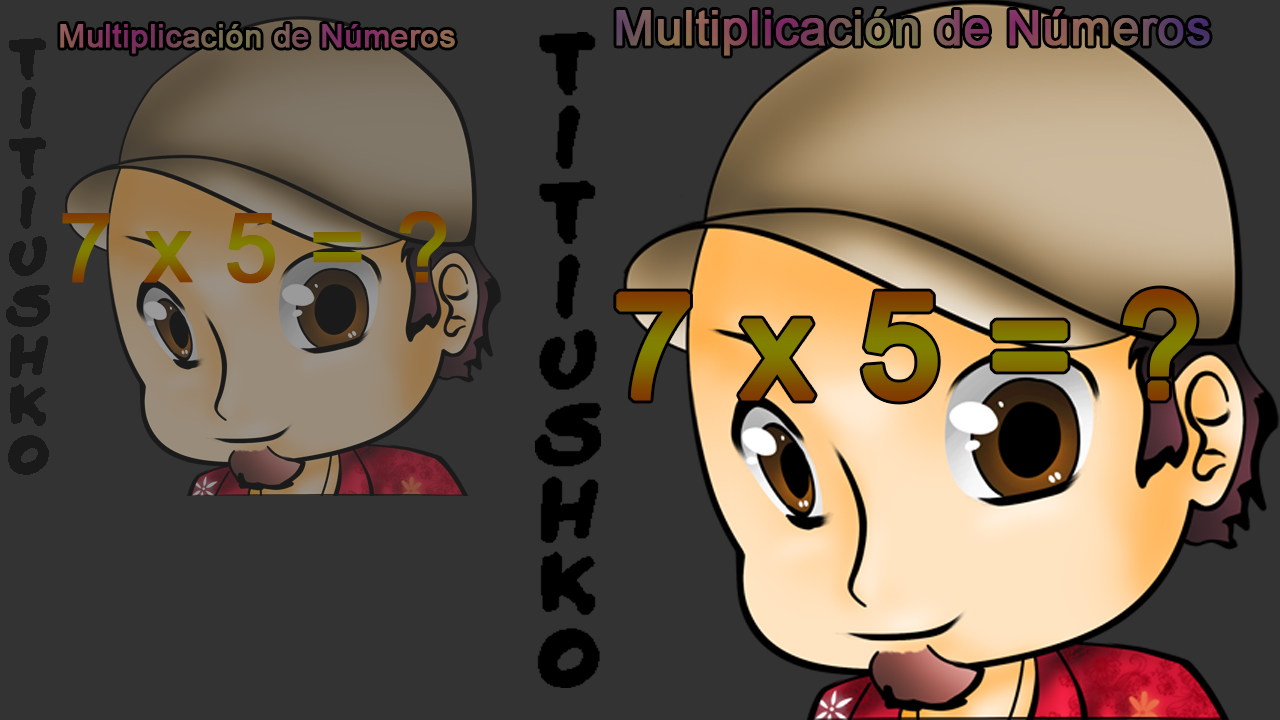
<style>
.page{position:relative;width:1280px;height:720px;background:#333333}
.page>*{position:absolute;margin:0}
.t1{font:48.3px "ArialMT";font-weight:bold}
.t2{font:32.1px "ArialMT";font-weight:bold}
.t3{font:95.5px "ArialMT";font-weight:bold}
.t4{font:143.5px "ArialMT";font-weight:bold}
</style>
<div class="page">
<p class="t1" style="left:616px;top:9px;width:594px;height:47px">Multiplicación de Números</p>
<p class="t2" style="left:60px;top:24px;width:395px;height:30px">Multiplicación de Números</p>
<p class="t3" style="left:62px;top:211px;width:385px;height:73px">7 x 5 = ?</p>
<p class="t4" style="left:616px;top:288px;width:581px;height:114px">7 x 5 = ?</p>
</div>
